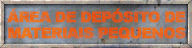
<style>
.page{position:relative;width:192px;height:48px}
.page>*{position:absolute;margin:0}
.t1{font:14.7px/16px "Arial-Black";letter-spacing:-0.06em;color:#e86018;text-transform:uppercase;font-weight:bold}
</style>
<div class="page">
<p class="t1" style="left:7px;top:8px;width:179px;height:32px;text-align:center">área de depósito de<br>materiais pequenos</p>
</div>
